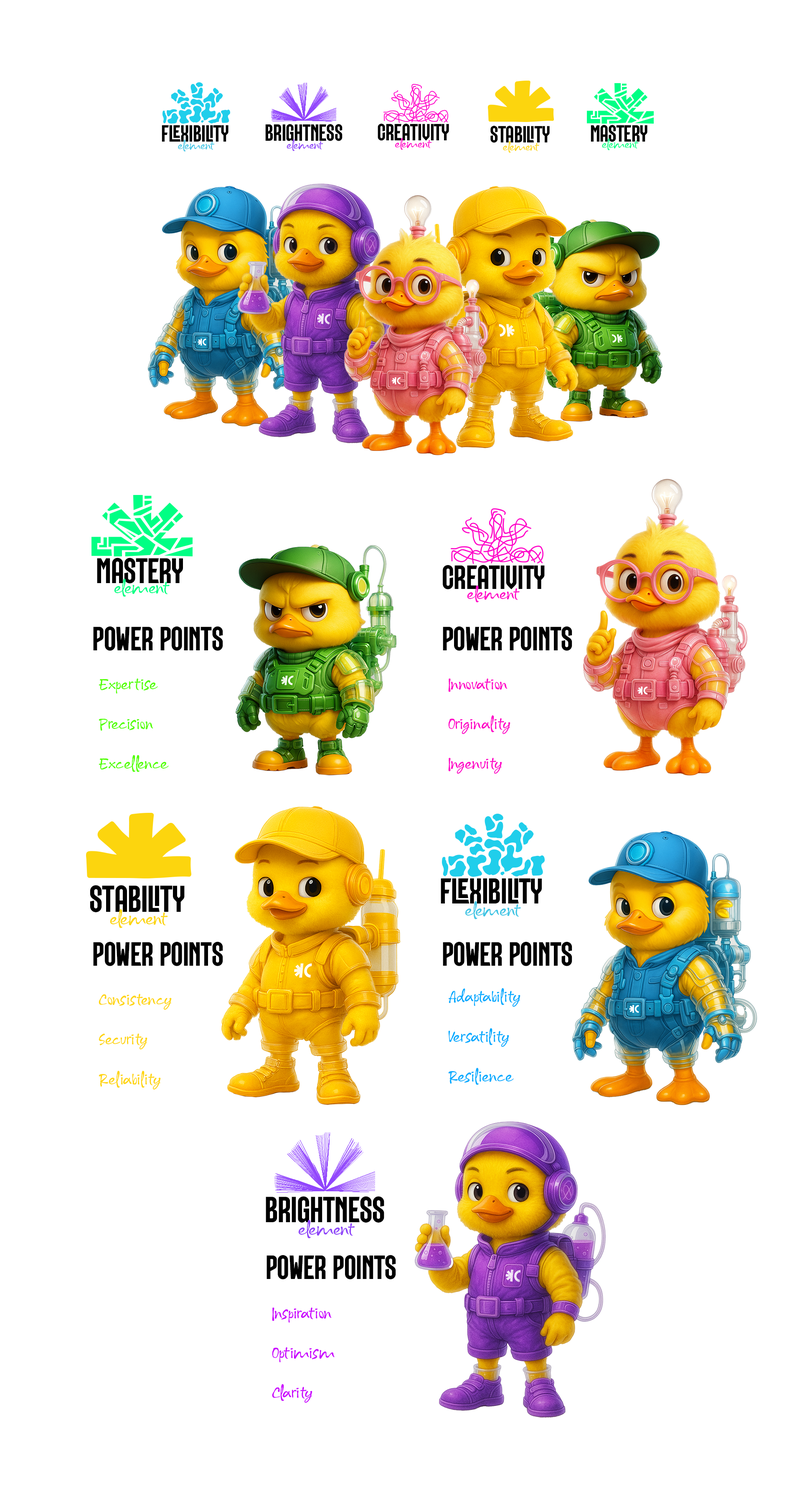
<style>
.page{position:relative;width:802px;height:1487px;background:#ffffff}
.page>*{position:absolute;margin:0}
.t1{font:23.5px "MogaRegular";color:#000000;text-transform:uppercase}
.t2{font:9.5px "SelfWrittenDemo-Regular";color:#ff00c8}
.t3{font:9.5px "SelfWrittenDemo-Regular";color:#40c5e4}
.t4{font:9.5px "SelfWrittenDemo-Regular";color:#8e43f9}
.t5{font:9.5px "SelfWrittenDemo-Regular";color:#fcd50e}
.t6{font:9.5px "SelfWrittenDemo-Regular";color:#00ff84}
.t7{font:35.6px "MogaRegular";color:#000000;text-transform:uppercase}
.t8{font:33.7px "MogaRegular";color:#000000;text-transform:uppercase}
.t9{font:14.4px "SelfWrittenDemo-Regular";color:#00ff84}
.t10{font:13.6px "SelfWrittenDemo-Regular";color:#ff00c8}
.t11{font:13.6px/19.9px "SelfWrittenDemo-Regular";color:#52ff00}
.t12{font:13.6px/19.9px "SelfWrittenDemo-Regular";color:#ff00c8}
.t13{font:35.8px "MogaRegular";color:#000000;text-transform:uppercase}
.t14{font:37.5px "MogaRegular";color:#000000;text-transform:uppercase}
.t15{font:14.5px "SelfWrittenDemo-Regular";color:#40c5e4}
.t16{font:15.1px "SelfWrittenDemo-Regular";color:#fcd50e}
.t17{font:13.6px/19.9px "SelfWrittenDemo-Regular";color:#00aaff}
.t18{font:13.6px/19.9px "SelfWrittenDemo-Regular";color:#ffd510}
.t19{font:36.3px "MogaRegular";color:#000000;text-transform:uppercase}
.t20{font:14.7px "SelfWrittenDemo-Regular";color:#8e43f9}
.t21{font:13.6px/19.9px "SelfWrittenDemo-Regular";color:#ca00ff}
</style>
<div class="page">
<p class="t1" style="left:162px;top:125px;width:66px;height:17px">Flexibility</p>
<p class="t1" style="left:265px;top:124px;width:77px;height:17px">Brightness</p>
<p class="t1" style="left:378px;top:124px;width:71px;height:17px">Creativity</p>
<p class="t1" style="left:490px;top:126px;width:60px;height:17px">Stability</p>
<p class="t1" style="left:591px;top:125px;width:56px;height:17px">Mastery</p>
<p class="t2" style="left:395px;top:138px;width:37px;height:12px">element</p>
<p class="t3" style="left:178px;top:140px;width:37px;height:12px">element</p>
<p class="t4" style="left:287px;top:139px;width:36px;height:12px">element</p>
<p class="t5" style="left:503px;top:141px;width:36px;height:12px">element</p>
<p class="t6" style="left:602px;top:138px;width:37px;height:12px">element</p>
<p class="t7" style="left:97px;top:558px;width:86px;height:25px">Mastery</p>
<p class="t8" style="left:443px;top:565px;width:102px;height:24px">Creativity</p>
<p class="t9" style="left:114px;top:578px;width:56px;height:19px">element</p>
<p class="t10" style="left:467px;top:585px;width:53px;height:17px">element</p>
<p class="t8" style="left:93px;top:626px;width:130px;height:25px">Power Points</p>
<p class="t8" style="left:443px;top:626px;width:129px;height:25px">Power Points</p>
<p class="t11" style="left:99px;top:678px;width:70px;height:94px">Expertise<br><br>Precision<br><br>Excellence</p>
<p class="t12" style="left:448px;top:678px;width:62px;height:96px">Innovation<br><br>Originality<br><br>Ingenuity</p>
<p class="t13" style="left:441px;top:878px;width:101px;height:25px">Flexibility</p>
<p class="t14" style="left:90px;top:885px;width:95px;height:27px">Stability</p>
<p class="t15" style="left:465px;top:901px;width:56px;height:18px">element</p>
<p class="t16" style="left:110px;top:909px;width:58px;height:19px">element</p>
<p class="t8" style="left:93px;top:941px;width:130px;height:25px">Power Points</p>
<p class="t8" style="left:443px;top:941px;width:129px;height:25px">Power Points</p>
<p class="t17" style="left:448px;top:988px;width:72px;height:97px">Adaptability<br><br>Versatility<br><br>Resilience</p>
<p class="t18" style="left:99px;top:994px;width:73px;height:96px">Consistency<br><br>Security<br><br>Reliability</p>
<p class="t19" style="left:266px;top:1196px;width:118px;height:27px">Brightness</p>
<p class="t20" style="left:298px;top:1220px;width:57px;height:18px">element</p>
<p class="t8" style="left:266px;top:1255px;width:130px;height:24px">Power Points</p>
<p class="t21" style="left:272px;top:1307px;width:63px;height:96px">Inspiration<br><br>Optimism<br><br>Clarity</p>
</div>
